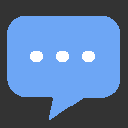
<style>
.page{position:relative;width:128px;height:128px;background:#6da6f5}
.page>*{position:absolute;margin:0}
.t1{font:95px "NotoSansTC-Light";color:#ffffff;font-weight:bold}
</style>
<div class="page">
<p class="t1" style="left:30px;top:51px;width:65px;height:11px">...</p>
</div>
